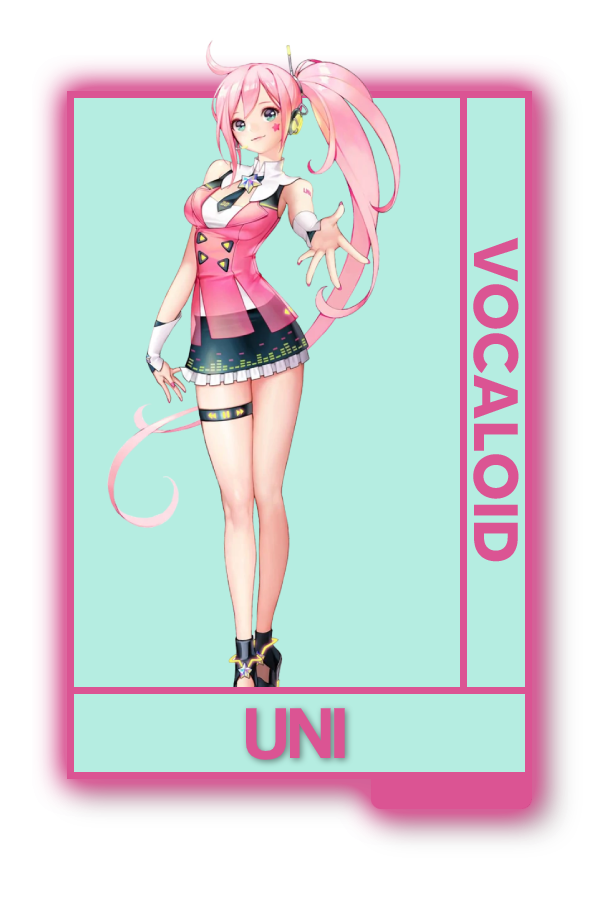
<style>
.page{position:relative;width:600px;height:900px;background:#b5ede1}
.page>*{position:absolute;margin:0}
.t1{font:62.5px "MADETOMMY-Bold";color:#db5493}
.t2{font:75px "CoolveticaRg-Regular";color:#db5493}
</style>
<div class="page">
<p class="t1" style="left:473px;top:237px;width:46px;height:325px;rotate:90deg">VOCALOID</p>
<p class="t2" style="left:245px;top:708px;width:100px;height:52px">UNI</p>
</div>
